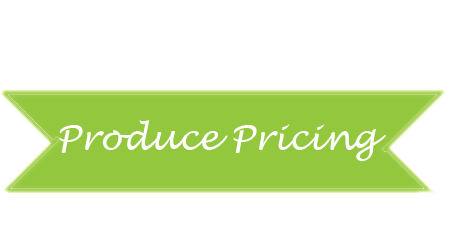
<style>
.page{position:relative;width:450px;height:250px;background:#ffffff}
.page>*{position:absolute;margin:0}
.t1{font:35px "LucidaHandwriting-Italic";color:#ffffff}
</style>
<div class="page">
<p class="t1" style="left:59px;top:120px;width:328px;height:41px">Produce Pricing</p>
</div>
